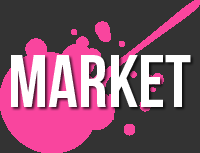
<style>
.page{position:relative;width:200px;height:153px;background:#333333}
.page>*{position:absolute;margin:0}
.t1{font:73.6px "BebasNeue";color:#ffffff}
</style>
<div class="page">
<p class="t1" style="left:11px;top:55px;width:180px;height:52px">MARKET</p>
</div>
